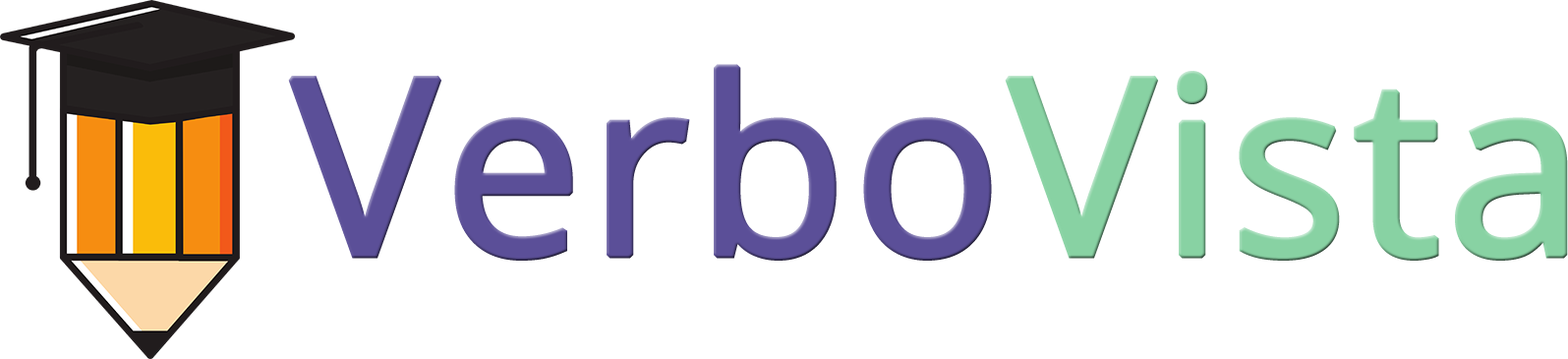
<style>
.page{position:relative;width:1568px;height:359px;background:#ffffff}
.page>*{position:absolute;margin:0}
.t1{font:245.8px "OpenSans-Regular";color:#5b4f98;font-weight:bold}
.t2{font:245.8px "OpenSans-Regular";color:#88d2a3;font-weight:bold}
</style>
<div class="page">
<p class="t1" style="left:288px;top:64px;width:1280px;height:197px">Verbo<span class="t2">Vista</span></p>
</div>
